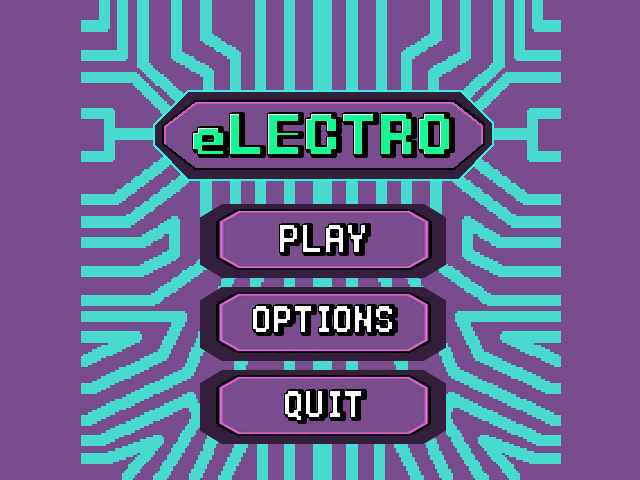
<style>
.page{position:relative;width:640px;height:480px;background:#794c8e}
.page>*{position:absolute;margin:0}
.t1{font:60.9px "Power-Clear-Bold";color:#14f995;scale:1.15 1}
.t2{font:42.2px "Power-Clear-Bold";color:#fbfbfb}
.t3{font:40px "Power-Clear-Bold";color:#fbfbfb}
</style>
<div class="page">
<p class="t1" style="left:192px;top:113px;width:258px;height:42px">eLECTRO</p>
<p class="t2" style="left:279px;top:224px;width:87px;height:29px">PLAY</p>
<p class="t3" style="left:252px;top:305px;width:141px;height:28px">OPTIONS</p>
<p class="t3" style="left:284px;top:390px;width:78px;height:31px">QUIT</p>
</div>
